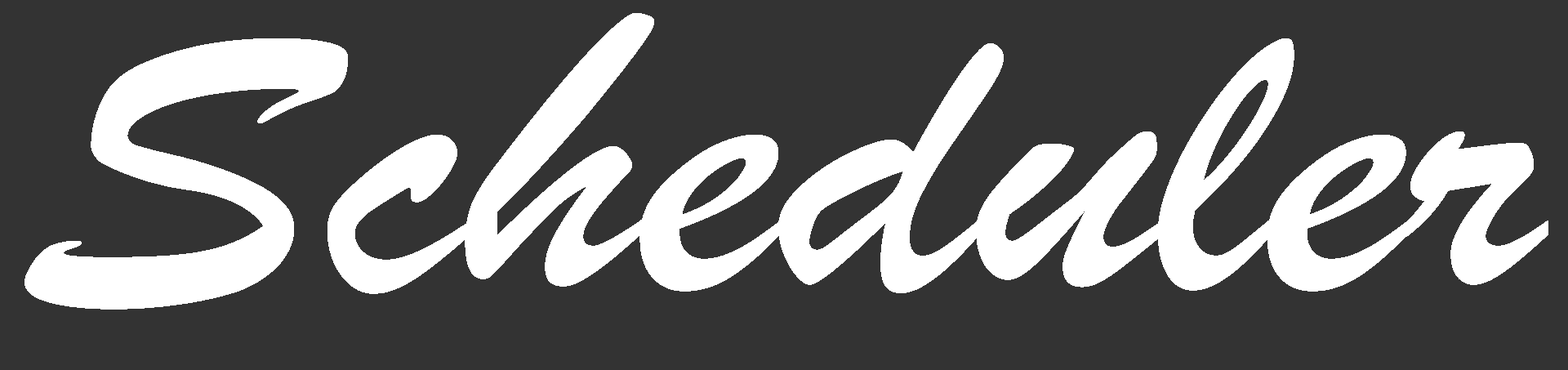
<style>
.page{position:relative;width:1568px;height:370px;background:#333333}
.page>*{position:absolute;margin:0}
.t1{font:419.8px "BrushScriptMT";color:#ffffff;scale:1.13 1}
</style>
<div class="page">
<p class="t1" style="left:24px;top:13px;width:1524px;height:297px">Scheduler</p>
</div>
